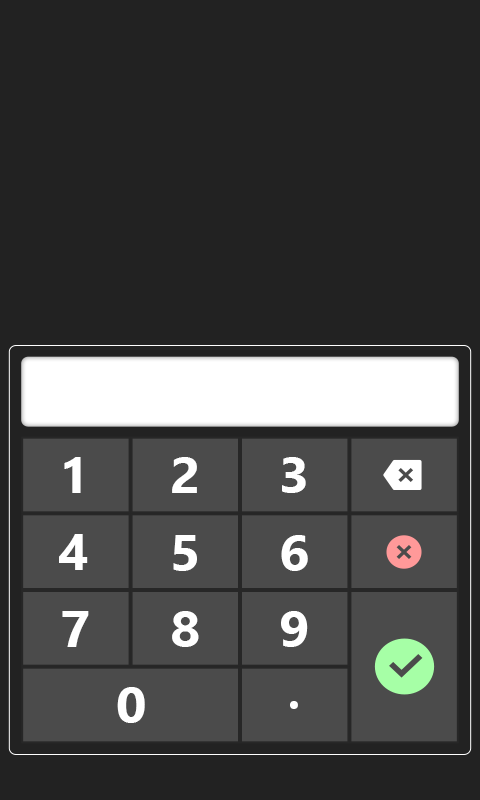
<style>
.page{position:relative;width:480px;height:800px;background:#222222}
.page>*{position:absolute;margin:0}
.t1{font:50px "SegoeUI-Bold";color:#ffffff;scale:1.06 1}
.t2{font:50px "SegoeUI-Bold";color:#ffffff;scale:0.89 1}
</style>
<div class="page">
<p class="t1" style="left:64px;top:457px;width:17px;height:36px">1</p>
<p class="t1" style="left:172px;top:457px;width:25px;height:36px">2</p>
<p class="t1" style="left:282px;top:457px;width:24px;height:36px">3</p>
<p class="t1" style="left:59px;top:534px;width:29px;height:36px">4</p>
<p class="t1" style="left:173px;top:535px;width:24px;height:36px">5</p>
<p class="t1" style="left:281px;top:535px;width:27px;height:36px">6</p>
<p class="t1" style="left:62px;top:611px;width:27px;height:36px">7</p>
<p class="t1" style="left:172px;top:611px;width:27px;height:36px">8</p>
<p class="t1" style="left:281px;top:611px;width:27px;height:36px">9</p>
<p class="t1" style="left:117px;top:687px;width:28px;height:36px">0</p>
<p class="t2" style="left:290px;top:701px;width:8px;height:8px">.</p>
</div>
